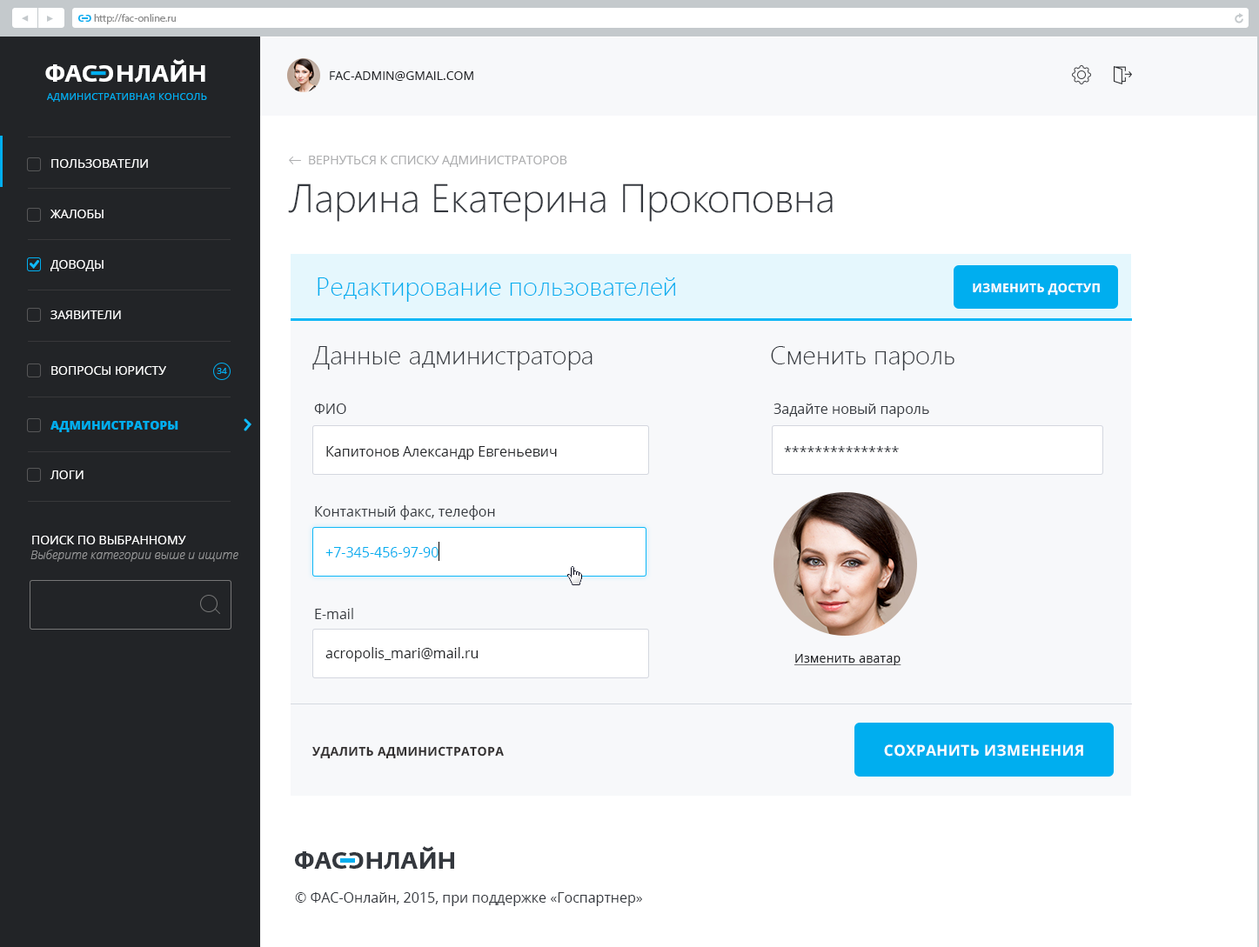
<style>
.page{position:relative;width:1259px;height:947px;background:#ffffff}
.page>*{position:absolute;margin:0}
.t1{font:8.7px "FedraSansPro-Bold";color:#00aeef;text-transform:uppercase}
.t2{font:10.4px "MyriadPro-Regular";color:#8d8d8d}
.t3{font:23.5px "FedraSansPro-Bold";color:#ffffff;text-transform:uppercase}
.t4{font:12.2px "OpenSans";color:#222427;text-transform:uppercase}
.t5{font:9.6px "OpenSans";letter-spacing:0.03em;color:#00aeef;text-transform:uppercase}
.t6{font:12.2px "OpenSans";color:#ffffff;text-transform:uppercase}
.t7{font:12.2px "OpenSans";color:#adaeb0;text-transform:uppercase}
.t8{font:40px "SegoeUI-Light";color:#34383e}
.t9{font:26.1px "SegoeUI-Light";color:#00aeef}
.t10{font:12.2px "OpenSans-Bold";letter-spacing:0.03em;color:#fefefe;text-transform:uppercase}
.t11{font:26.1px "SegoeUI-Light";color:#34383e}
.t12{font:8.7px "OpenSans";color:#00aeef}
.t13{font:13.9px/52.2px "OpenSans";color:#34383e}
.t14{font:13.9px "OpenSans";color:#34383e}
.t15{font:12.2px "OpenSans-Extrabold";color:#00aeef;text-transform:uppercase}
.t16{font:13.9px/50.5px "OpenSans";color:#222427}
.t17{font:13.9px/50.5px "OpenSans";color:#00aeef}
.t18{font:12.2px "OpenSansLight-Italic";color:#959596}
.t19{font:12.2px "OpenSans";letter-spacing:0.02em;color:#222427;text-decoration:underline}
.t20{font:12.2px "OpenSans-Bold";letter-spacing:0.03em;color:#322f2f;text-transform:uppercase}
.t21{font:15.1px "OpenSans-Bold";letter-spacing:0.03em;color:#fefefe;text-transform:uppercase}
.t22{font:23.5px "FedraSansPro-Bold";color:#34383e;text-transform:uppercase}
</style>
<div class="page">
<p class="t1" style="left:78px;top:15px;width:6px;height:7px">c</p>
<p class="t1" style="left:85px;top:15px;width:6px;height:7px;rotate:180deg">c</p>
<p class="t2" style="left:94px;top:14px;width:82px;height:10px">http://fac-online.ru</p>
<p class="t3" style="left:45px;top:59px;width:160px;height:24px">ФАc   НЛАЙН</p>
<p class="t3" style="left:98px;top:65px;width:15px;height:17px;rotate:180deg">c</p>
<p class="t4" style="left:330px;top:71px;width:143px;height:10px">FAC-Admin@gmail.com</p>
<p class="t5" style="left:47px;top:93px;width:160px;height:9px">Административная консоль</p>
<p class="t6" style="left:51px;top:159px;width:97px;height:9px">Пользователи</p>
<p class="t7" style="left:309px;top:156px;width:258px;height:11px">Вернуться к списку администраторов</p>
<p class="t8" style="left:288px;top:184px;width:544px;height:38px">Ларина Екатерина Прокоповна</p>
<p class="t6" style="left:50px;top:210px;width:54px;height:8px">жалобы</p>
<p class="t6" style="left:50px;top:260px;width:54px;height:11px">Доводы</p>
<p class="t9" style="left:318px;top:277px;width:357px;height:25px">Редактирование пользователей</p>
<p class="t10" style="left:973px;top:283px;width:127px;height:13px">Изменить доступ</p>
<p class="t6" style="left:50px;top:311px;width:71px;height:8px">ЗАявители</p>
<p class="t11" style="left:312px;top:346px;width:280px;height:25px">Данные администратора</p>
<p class="t11" style="left:771px;top:346px;width:183px;height:25px">Сменить пароль</p>
<p class="t6" style="left:51px;top:366px;width:115px;height:9px">вопросы юристу</p>
<p class="t12" style="left:217px;top:368px;width:10px;height:6px">34</p>
<p class="t13" style="left:314px;top:404px;width:181px;height:215px">ФИО <br>Контактный факс, телефон<br>E-mail</p>
<p class="t14" style="left:773px;top:404px;width:156px;height:14px">Задайте новый пароль</p>
<p class="t15" style="left:50px;top:421px;width:128px;height:11px">Администраторы</p>
<p class="t16" style="left:325px;top:446px;width:232px;height:216px">Капитонов Александр Евгеньевич<br><span class="t17">+7-345-456-97-90<br></span>acropolis_mari@mail.ru</p>
<p class="t14" style="left:784px;top:446px;width:115px;height:6px">***************</p>
<p class="t6" style="left:50px;top:471px;width:34px;height:8px">ЛОги</p>
<p class="t6" style="left:32px;top:536px;width:154px;height:9px">Поиск по выбранному</p>
<p class="t18" style="left:30px;top:550px;width:208px;height:12px">Выберите категории выше и ищите</p>
<p class="t19" style="left:793px;top:654px;width:108px;height:11px">Изменить аватар</p>
<p class="t20" style="left:312px;top:746px;width:192px;height:13px">удалить администратора</p>
<p class="t21" style="left:884px;top:745px;width:199px;height:12px">Сохранить изменения</p>
<p class="t22" style="left:295px;top:846px;width:159px;height:24px">ФАc   НЛАЙН</p>
<p class="t22" style="left:349px;top:853px;width:15px;height:16px;rotate:180deg">c</p>
<p class="t14" style="left:295px;top:893px;width:347px;height:13px">© ФАС-Онлайн, 2015, при поддержке «Госпартнер»</p>
</div>
